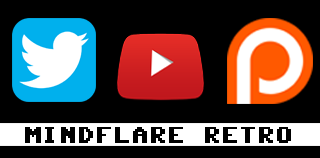
<style>
.page{position:relative;width:320px;height:158px;background:#000000}
.page>*{position:absolute;margin:0}
.t1{font:18px "CBM";color:#000000}
</style>
<div class="page">
<p class="t1" style="left:25px;top:127px;width:266px;height:16px">MINDFLARE RETRO</p>
</div>
